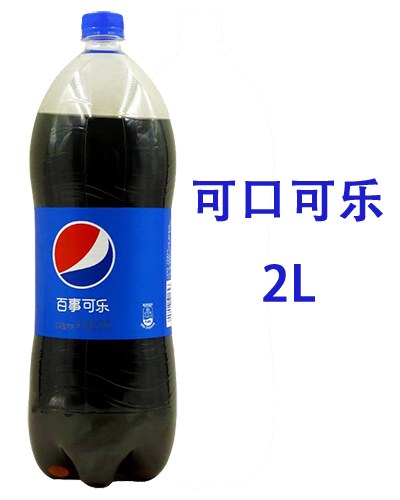
<style>
.page{position:relative;width:400px;height:500px;background:#ffffff}
.page>*{position:absolute;margin:0}
.t1{font:48px "AdobeHeitiStd-Regular";color:#1d1dcc;font-weight:bold}
</style>
<div class="page">
<p class="t1" style="left:193px;top:178px;width:190px;height:124px">可口可乐<br>      2L</p>
</div>
